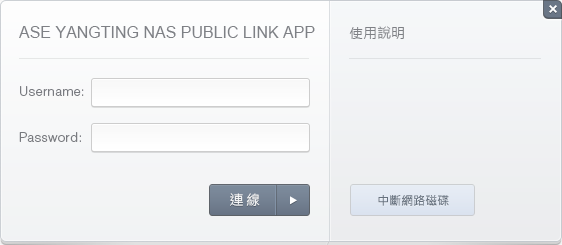
<style>
.page{position:relative;width:562px;height:245px}
.page>*{position:absolute;margin:0}
.t1{font:16px "ArialMT";color:#6d7179}
.t2{font:14px "MicrosoftJhengHeiRegular";color:#6d7179}
.t3{font:13px "HelveticaLTStd-Light";letter-spacing:0.02em;color:#797b80}
.t4{font:14px "MicrosoftJhengHeiRegular";letter-spacing:0.2em;color:#ffffff}
.t5{font:12px "MicrosoftJhengHeiRegular";color:#66717e}
</style>
<div class="page">
<p class="t1" style="left:19px;top:26px;width:296px;height:12px">ASE YANGTING NAS PUBLIC LINK APP</p>
<p class="t2" style="left:349px;top:26px;width:55px;height:13px">使用說明</p>
<p class="t3" style="left:20px;top:86px;width:64px;height:10px">Username:</p>
<p class="t3" style="left:19px;top:132px;width:62px;height:10px">Password:</p>
<p class="t4" style="left:230px;top:193px;width:30px;height:13px">連線</p>
<p class="t5" style="left:378px;top:195px;width:71px;height:11px">中斷網路磁碟</p>
</div>
